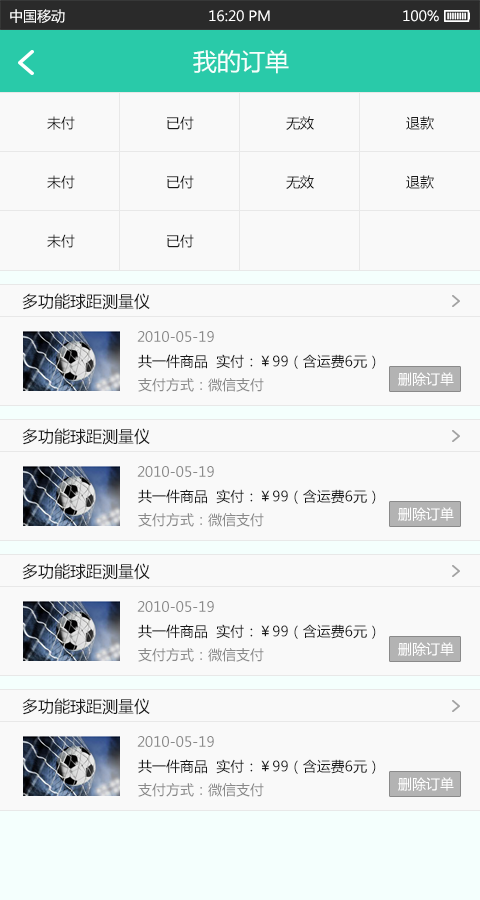
<style>
.page{position:relative;width:480px;height:900px;background:#f9f9f9}
.page>*{position:absolute;margin:0}
.t1{font:14px "MicrosoftYaHei";color:#ffffff}
.t2{font:24px "MicrosoftYaHei";color:#f4fffd}
.t3{font:14px "MicrosoftYaHei";color:#191919}
.t4{font:16px "MicrosoftYaHei";color:#191919}
.t5{font:14px "MicrosoftYaHei";color:#898989}
</style>
<div class="page">
<p class="t1" style="left:10px;top:9px;width:55px;height:14px">中国移动</p>
<p class="t1" style="left:209px;top:10px;width:61px;height:12px">16:20 PM</p>
<p class="t1" style="left:403px;top:10px;width:36px;height:12px">100%</p>
<p class="t2" style="left:193px;top:50px;width:96px;height:24px">我的订单</p>
<p class="t3" style="left:47px;top:116px;width:28px;height:14px">未付</p>
<p class="t3" style="left:167px;top:116px;width:27px;height:14px">已付</p>
<p class="t3" style="left:286px;top:116px;width:28px;height:14px">无效</p>
<p class="t3" style="left:406px;top:116px;width:28px;height:14px">退款</p>
<p class="t3" style="left:47px;top:175px;width:28px;height:14px">未付</p>
<p class="t3" style="left:167px;top:175px;width:27px;height:14px">已付</p>
<p class="t3" style="left:286px;top:175px;width:28px;height:14px">无效</p>
<p class="t3" style="left:406px;top:175px;width:28px;height:14px">退款</p>
<p class="t3" style="left:47px;top:234px;width:28px;height:14px">未付</p>
<p class="t3" style="left:167px;top:234px;width:27px;height:14px">已付</p>
<p class="t4" style="left:22px;top:293px;width:128px;height:17px">多功能球距测量仪</p>
<p class="t5" style="left:137px;top:331px;width:77px;height:11px">2010-05-19</p>
<p class="t3" style="left:138px;top:354px;width:238px;height:15px">共一件商品  实付：￥99（含运费6元）</p>
<p class="t1" style="left:398px;top:372px;width:56px;height:14px">删除订单</p>
<p class="t5" style="left:138px;top:378px;width:126px;height:14px">支付方式：微信支付</p>
<p class="t4" style="left:22px;top:428px;width:128px;height:17px">多功能球距测量仪</p>
<p class="t5" style="left:137px;top:466px;width:77px;height:11px">2010-05-19</p>
<p class="t3" style="left:138px;top:489px;width:238px;height:15px">共一件商品  实付：￥99（含运费6元）</p>
<p class="t1" style="left:398px;top:507px;width:56px;height:14px">删除订单</p>
<p class="t5" style="left:138px;top:513px;width:126px;height:14px">支付方式：微信支付</p>
<p class="t4" style="left:22px;top:563px;width:128px;height:17px">多功能球距测量仪</p>
<p class="t5" style="left:137px;top:601px;width:77px;height:11px">2010-05-19</p>
<p class="t3" style="left:138px;top:624px;width:238px;height:15px">共一件商品  实付：￥99（含运费6元）</p>
<p class="t5" style="left:138px;top:648px;width:126px;height:14px">支付方式：微信支付</p>
<p class="t1" style="left:398px;top:642px;width:56px;height:14px">删除订单</p>
<p class="t4" style="left:22px;top:698px;width:128px;height:17px">多功能球距测量仪</p>
<p class="t5" style="left:137px;top:736px;width:77px;height:11px">2010-05-19</p>
<p class="t3" style="left:138px;top:759px;width:238px;height:15px">共一件商品  实付：￥99（含运费6元）</p>
<p class="t5" style="left:138px;top:783px;width:126px;height:14px">支付方式：微信支付</p>
<p class="t1" style="left:398px;top:777px;width:56px;height:14px">删除订单</p>
</div>
